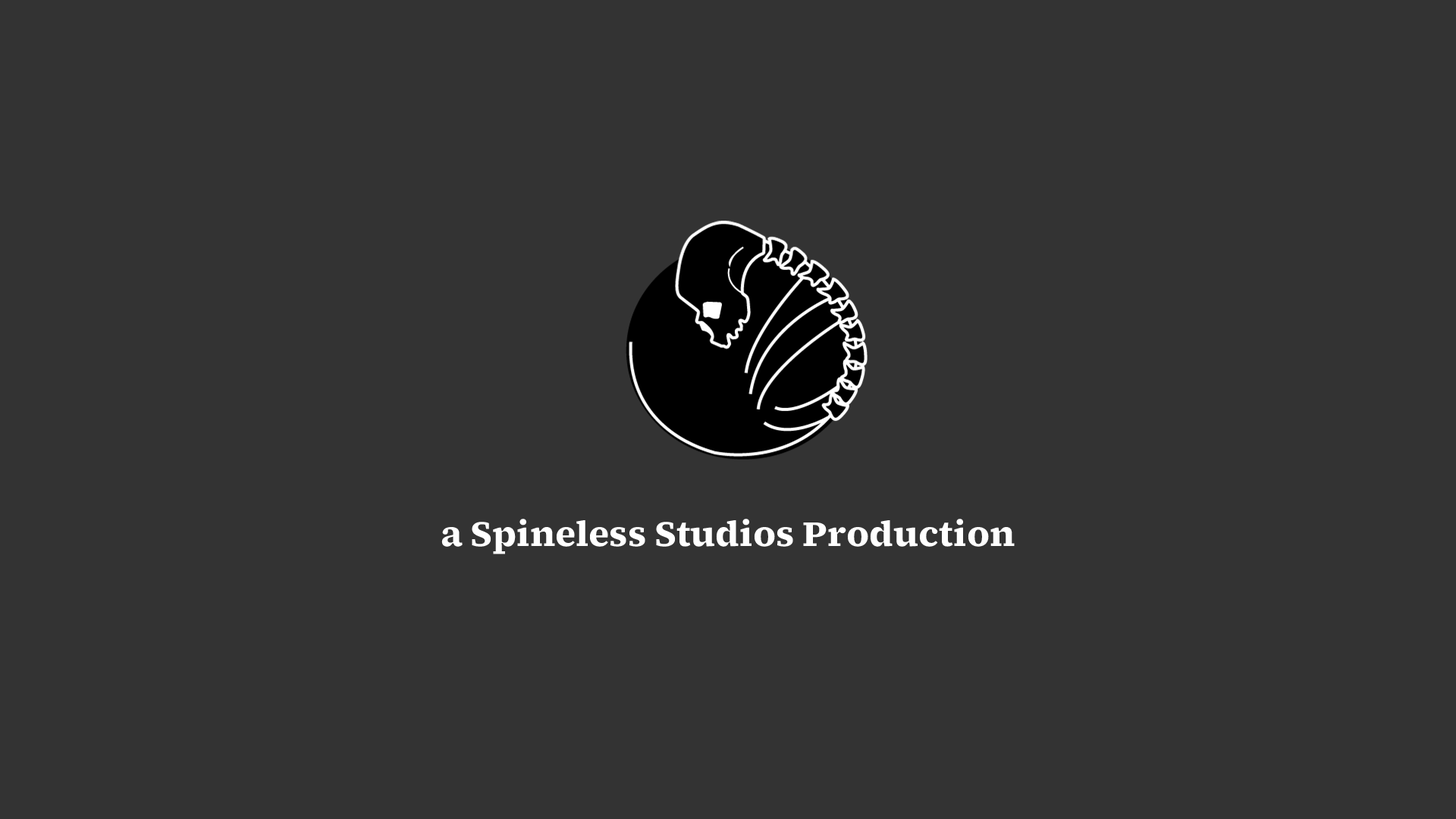
<style>
.page{position:relative;width:1456px;height:819px;background:#333333}
.page>*{position:absolute;margin:0}
.t1{font:35.9px "SourceSerif4Roman-CaptionBold";color:#ffffff}
</style>
<div class="page">
<p class="t1" style="left:441px;top:519px;width:574px;height:35px">a Spineless Studios Production</p>
</div>
